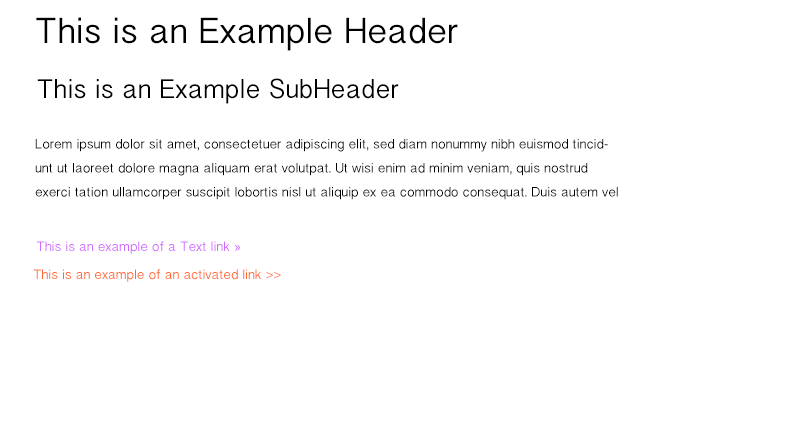
<style>
.page{position:relative;width:801px;height:436px;background:#ffffff}
.page>*{position:absolute;margin:0}
.t1{font:32px "BanglaSangamMN";color:#000000}
.t2{font:24px "BanglaSangamMN";color:#000000}
.t3{font:12px/24px "BanglaSangamMN";color:#000000}
.t4{font:12px "BanglaSangamMN";color:#d167ff}
.t5{font:12px "ArialMT";color:#d167ff}
.t6{font:12px "BanglaSangamMN";color:#ff672e}
</style>
<div class="page">
<p class="t1" style="left:36px;top:17px;width:422px;height:34px">This is an Example Header</p>
<p class="t2" style="left:37px;top:78px;width:362px;height:26px">This is an Example SubHeader</p>
<p class="t3" style="left:35px;top:139px;width:583px;height:61px">Lorem ipsum dolor sit amet, consectetuer adipiscing elit, sed diam nonummy nibh euismod tincidunt ut laoreet dolore magna aliquam erat volutpat. Ut wisi enim ad minim veniam, quis nostrud exerci tation ullamcorper suscipit lobortis nisl ut aliquip ex ea commodo consequat. Duis autem vel feugait nulla facilisi.</p>
<p class="t4" style="left:36px;top:241px;width:205px;height:13px">This is an example of a Text link <span class="t5">»</span></p>
<p class="t6" style="left:33px;top:269px;width:248px;height:13px">This is an example of an activated link &gt;&gt;</p>
</div>
